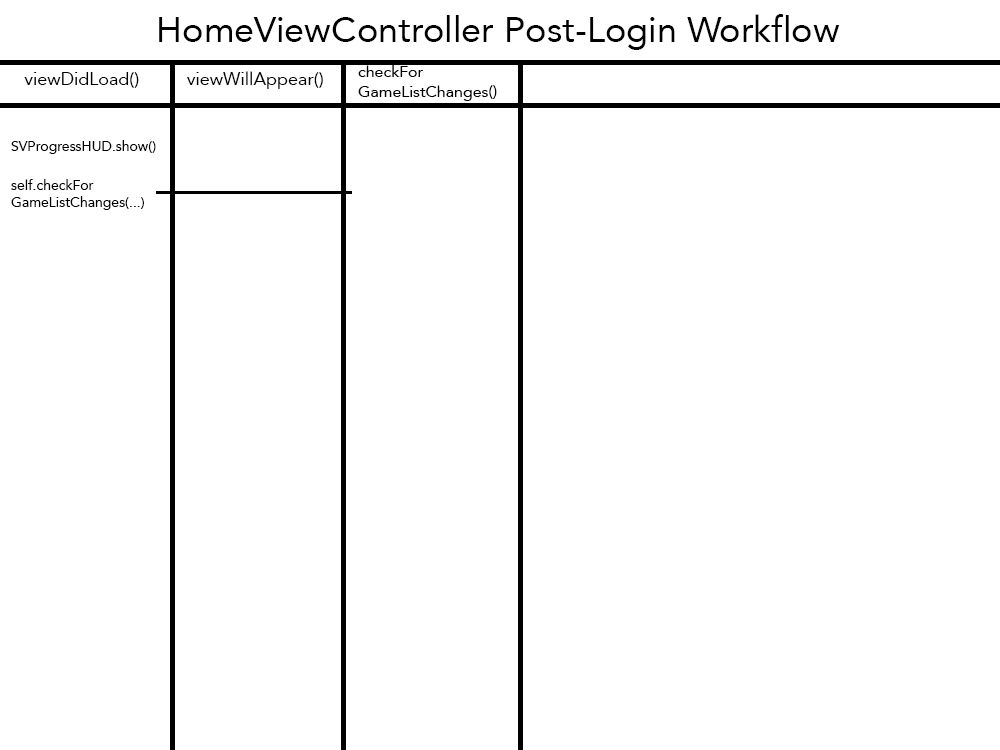
<style>
.page{position:relative;width:1000px;height:750px;background:#ffffff}
.page>*{position:absolute;margin:0}
.t1{font:36px "Avenir-Roman";color:#000000}
.t2{font:16px "Avenir-Roman";color:#000000}
.t3{font:18px "Avenir-Roman";color:#000000}
.t4{font:14px "Avenir-Roman";color:#000000}
</style>
<div class="page">
<p class="t1" style="left:159px;top:14px;width:681px;height:36px">HomeViewController Post-Login Workflow</p>
<p class="t2" style="left:358px;top:65px;width:139px;height:36px">checkFor<br>GameListChanges()</p>
<p class="t3" style="left:24px;top:72px;width:115px;height:16px">viewDidLoad()</p>
<p class="t3" style="left:186px;top:71px;width:137px;height:18px">viewWillAppear()</p>
<p class="t4" style="left:11px;top:140px;width:145px;height:14px">SVProgressHUD.show()</p>
<p class="t4" style="left:11px;top:179px;width:133px;height:31px">self.checkFor<br>GameListChanges(...)</p>
</div>
